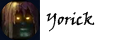
<style>
.page{position:relative;width:140px;height:40px;background:#ffffff}
.page>*{position:absolute;margin:0}
.t1{font:16px "VinerHandITC";color:#000000}
</style>
<div class="page">
<p class="t1" style="left:46px;top:11px;width:49px;height:21px">Yorick</p>
</div>
